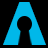
<style>
.page{position:relative;width:48px;height:48px;background:#000000}
.page>*{position:absolute;margin:0}
.t1{font:60px "Arial-BoldMT";color:#00b8e9}
</style>
<div class="page">
<p class="t1" style="left:3px;top:2px;width:43px;height:43px">A</p>
</div>
